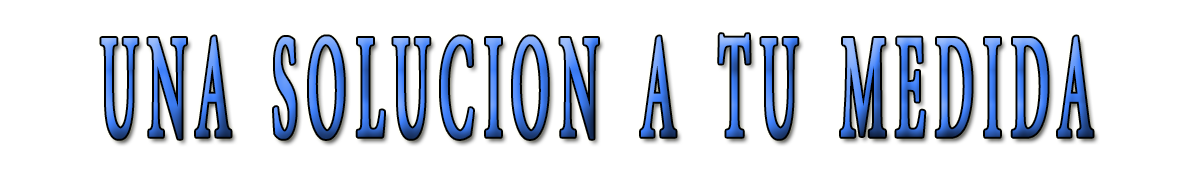
<style>
.page{position:relative;width:1199px;height:170px;background:#ffffff}
.page>*{position:absolute;margin:0}
.t1{font:356.4px "AdobeHebrew-Regular";letter-spacing:0.2em;font-variant:small-caps;font-weight:bold;scale:0.33 1}
</style>
<div class="page">
<p class="t1" style="left:101px;top:34px;width:992px;height:105px">una solucion a tu medida</p>
</div>
